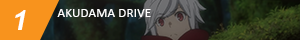
<style>
.page{position:relative;width:300px;height:40px}
.page>*{position:absolute;margin:0}
.t1{font:26.7px "Arial-BoldItalicMT";color:#ffffff}
.t2{font:13.3px "Calibri";color:#ffffff}
</style>
<div class="page">
<p class="t1" style="left:15px;top:10px;width:11px;height:20px">1</p>
<p class="t2" style="left:57px;top:9px;width:94px;height:8px">AKUDAMA DRIVE</p>
</div>
